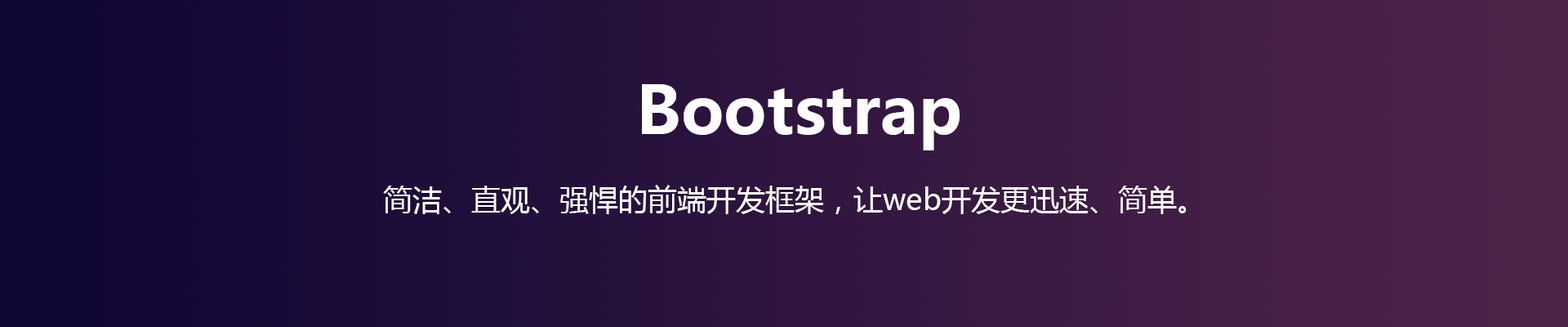
<style>
.page{position:relative;width:1568px;height:327px}
.page>*{position:absolute;margin:0}
.t1{font:65.3px "MicrosoftYaHei-Bold";color:#ffffff}
.t2{font:29.4px "MicrosoftYaHei";color:#ffffff}
</style>
<div class="page">
<p class="t1" style="left:642px;top:84px;width:318px;height:66px">Bootstrap</p>
<p class="t2" style="left:383px;top:185px;width:804px;height:29px">简洁、直观、强悍的前端开发框架，让web开发更迅速、简单。</p>
</div>
